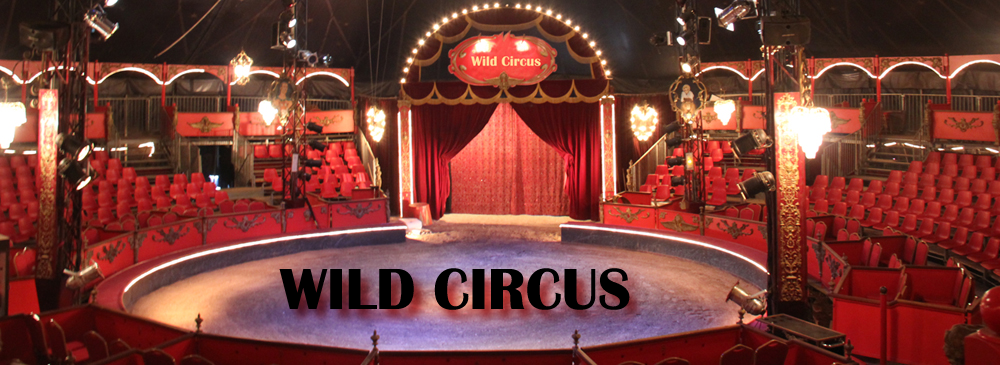
<style>
.page{position:relative;width:1000px;height:365px}
.page>*{position:absolute;margin:0}
.t1{font:60px "BritannicBold";color:#000000}
</style>
<div class="page">
<p class="t1" style="left:279px;top:268px;width:351px;height:42px">WILD CIRCUS</p>
</div>
